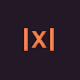
<style>
.page{position:relative;width:80px;height:80px;background:#231826}
.page>*{position:absolute;margin:0}
.t1{font:24px "Ubuntu-Bold";color:#eb7b4b}
</style>
<div class="page">
<p class="t1" style="left:31px;top:31px;width:16px;height:17px">X</p>
</div>
